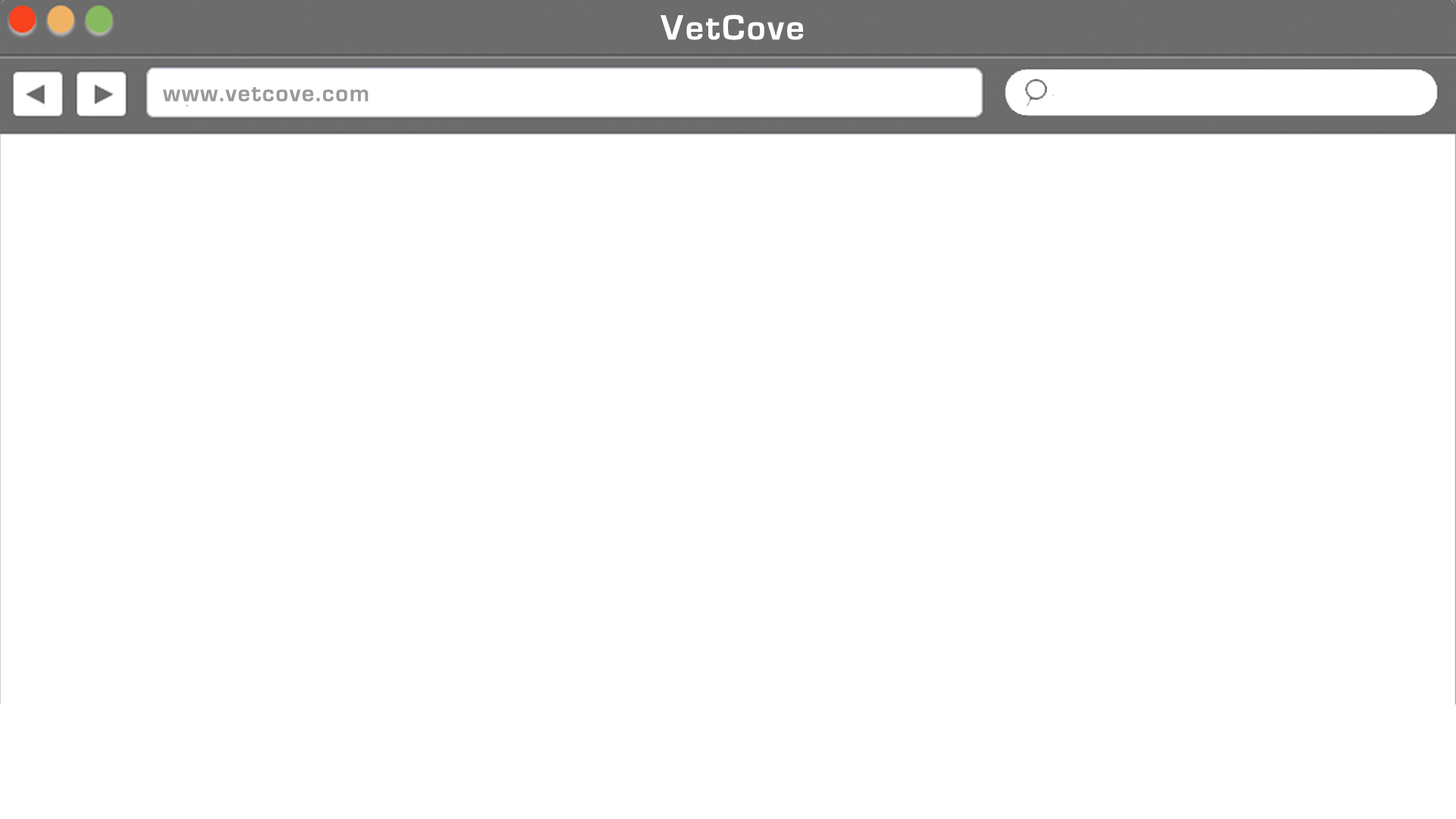
<style>
.page{position:relative;width:1456px;height:819px;background:#ffffff}
.page>*{position:absolute;margin:0}
.t1{font:36.4px "EurostileBold";letter-spacing:0.06em;color:#ffffff}
.t2{font:24.3px "EurostileBold";letter-spacing:0.06em;color:#9a9a9a}
</style>
<div class="page">
<p class="t1" style="left:660px;top:14px;width:143px;height:26px">VetCove</p>
<p class="t2" style="left:163px;top:87px;width:206px;height:15px">www.vetcove.com</p>
</div>
